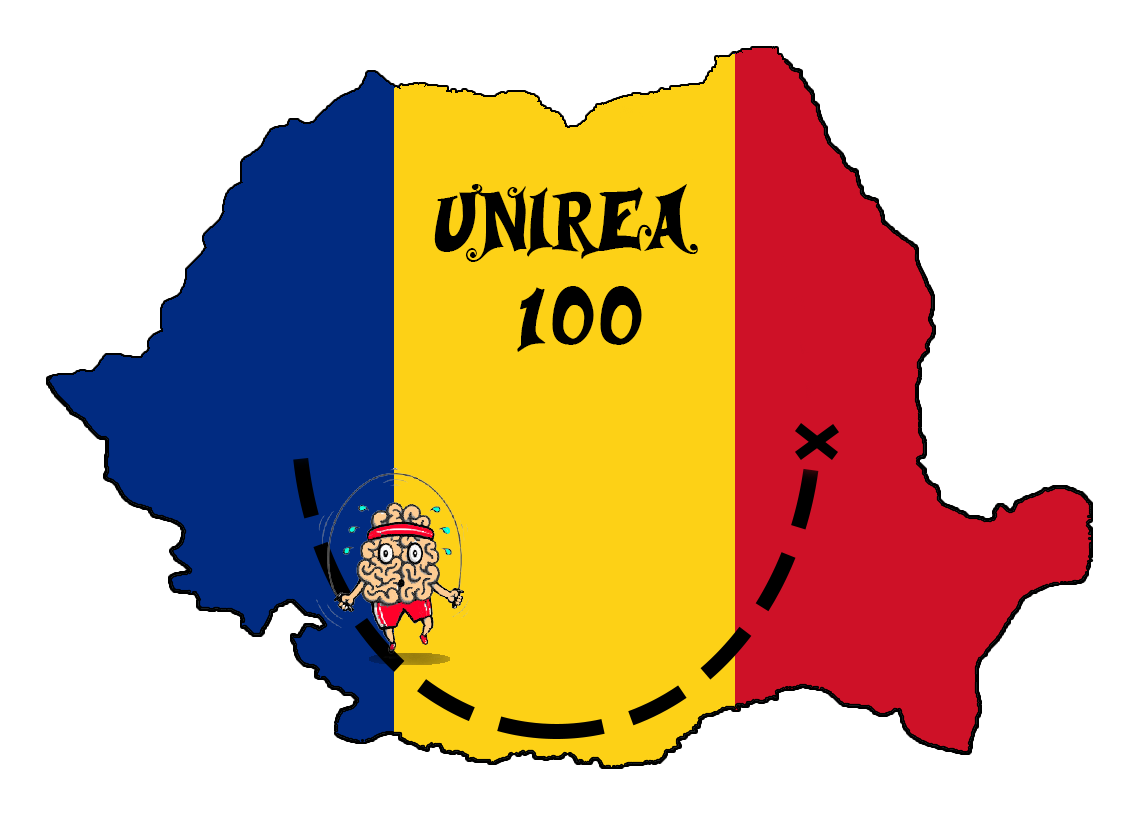
<style>
.page{position:relative;width:1139px;height:815px;background:#ffffff}
.page>*{position:absolute;margin:0}
.t1{font:80px "Musicals";color:#000000}
</style>
<div class="page">
<p class="t1" style="left:434px;top:184px;width:264px;height:168px;text-align:center">Unirea <br>100</p>
</div>
